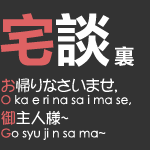
<style>
.page{position:relative;width:150px;height:150px;background:#333333}
.page>*{position:absolute;margin:0}
.t1{font:55px "MicrosoftYaHei-Bold";color:#de6263}
.t2{font:55px "MicrosoftYaHei-Bold";color:#ffffff}
.t3{font:20px "MicrosoftYaHei-Bold";color:#ffffff}
.t4{font:15px "DFPOP1-W5-WING-RKSJ-H";color:#ffffff}
.t5{font:15px "DFPOP1-W5-WING-RKSJ-H";color:#de6263}
.t6{font:12px "CenturyGothic";color:#ffffff}
.t7{font:12px "CenturyGothic";color:#de6263}
</style>
<div class="page">
<p class="t1" style="left:0px;top:13px;width:110px;height:54px">宅<span class="t2">談</span></p>
<p class="t3" style="left:114px;top:46px;width:20px;height:20px">裏</p>
<p class="t4" style="left:1px;top:78px;width:116px;height:15px"><span class="t5">お</span>帰りなさいませ，</p>
<p class="t6" style="left:1px;top:95px;width:130px;height:11px"><span class="t7">O</span> ka e ri na sa i ma se,</p>
<p class="t4" style="left:1px;top:110px;width:68px;height:15px"><span class="t5">御</span>主人様~</p>
<p class="t6" style="left:1px;top:128px;width:105px;height:12px"><span class="t7">G</span>o syu ji n sa ma~</p>
</div>
